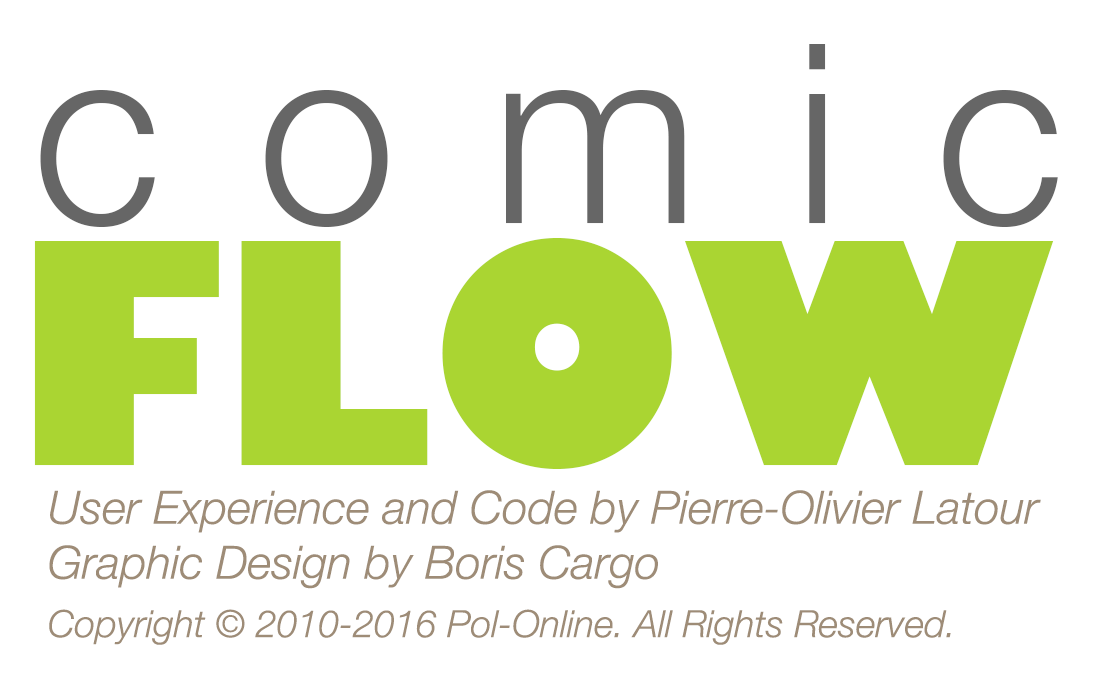
<style>
.page{position:relative;width:1100px;height:700px;background:#ffffff}
.page>*{position:absolute;margin:0}
.t1{font:250px "HelveticaNeue-Light";letter-spacing:0.38em;color:#666666}
.t2{font:300px "GillSans-UltraBold";color:#aad532}
.t3{font:45.8px "HelveticaNeue-LightItalic";color:#9e8c77}
.t4{font:37.5px/58.3px "HelveticaNeue-LightItalic";color:#9e8c77}
</style>
<div class="page">
<p class="t1" style="left:40px;top:44px;width:1018px;height:183px">comic</p>
<p class="t2" style="left:34px;top:238px;width:1020px;height:231px">FLOW</p>
<p class="t3" style="left:49px;top:490px;width:992px;height:155px;text-align:justify">User Experience and Code by Pierre-Olivier Latour<br>Graphic Design by Boris Cargo<br><span class="t4">Copyright © 2010-2016 Pol-Online. All Rights Reserved.</span></p>
</div>
